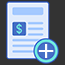
<style>
.page{position:relative;width:65px;height:65px;background:#333333}
.page>*{position:absolute;margin:0}
.t1{font:25.4px "Tahoma";letter-spacing:0.01em;color:#ffffff}
</style>
<div class="page">
<p class="t1" style="left:38px;top:44px;width:16px;height:14px">+</p>
</div>
